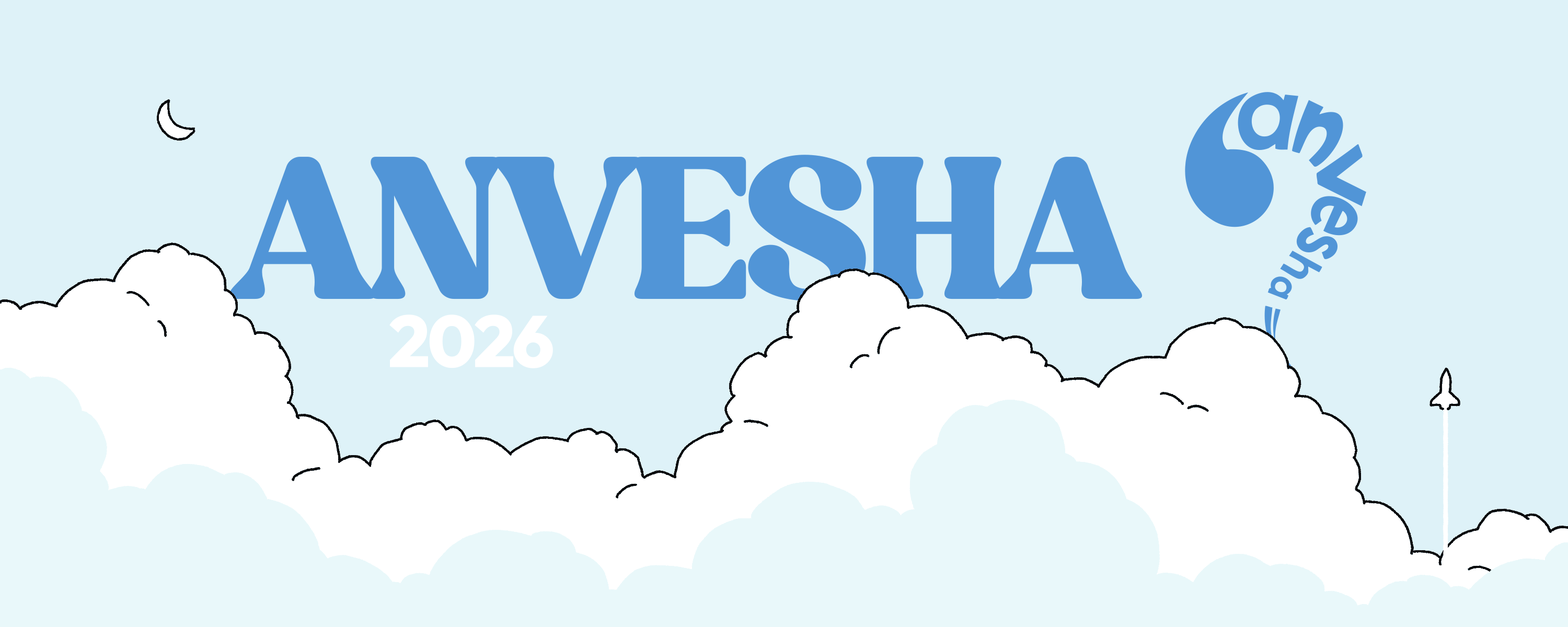
<style>
.page{position:relative;width:1568px;height:627px;background:#def2f8}
.page>*{position:absolute;margin:0}
.t1{font:194.3px "FreshMango-Regular";letter-spacing:-0.04em;color:#5195d7}
.t2{font:72.7px "Outfit-ExtraBold";letter-spacing:-0.04em;color:#ffffff}
</style>
<div class="page">
<p class="t1" style="left:228px;top:155px;width:914px;height:146px">ANVESHA</p>
<p class="t2" style="left:389px;top:315px;width:164px;height:53px">2026</p>
</div>
